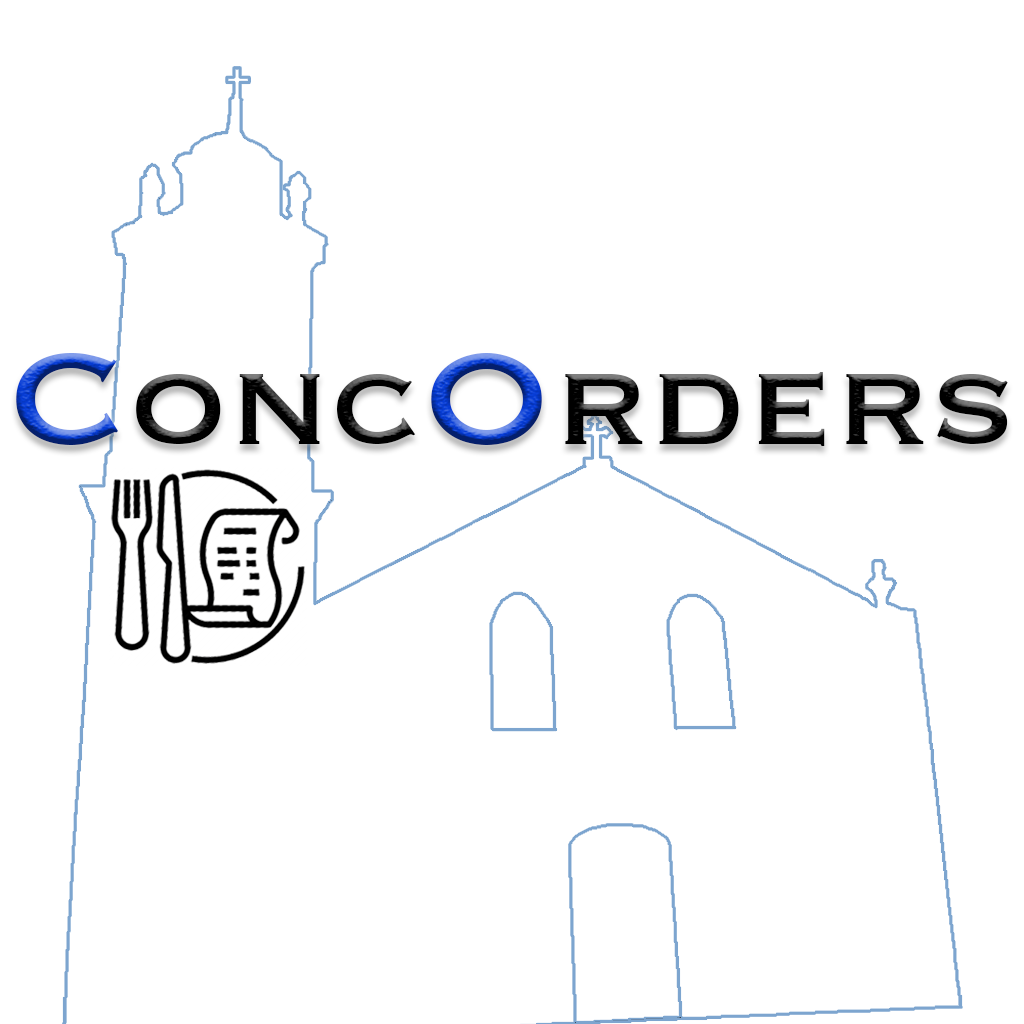
<style>
.page{position:relative;width:1024px;height:1024px;background:#ffffff}
.page>*{position:absolute;margin:0}
.t1{font:157.8px "Copperplate"}
.t2{font:170.6px "Copperplate"}
</style>
<div class="page">
<p class="t1" style="left:16px;top:353px;width:992px;height:93px"><span class="t2">C</span>onc<span class="t2">O</span>rders</p>
</div>
